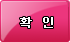
<style>
.page{position:relative;width:70px;height:42px}
.page>*{position:absolute;margin:0}
.t1{font:12px "Dotum";color:#ffffff;font-weight:bold}
</style>
<div class="page">
<p class="t1" style="left:20px;top:17px;width:33px;height:11px">확  인</p>
</div>
